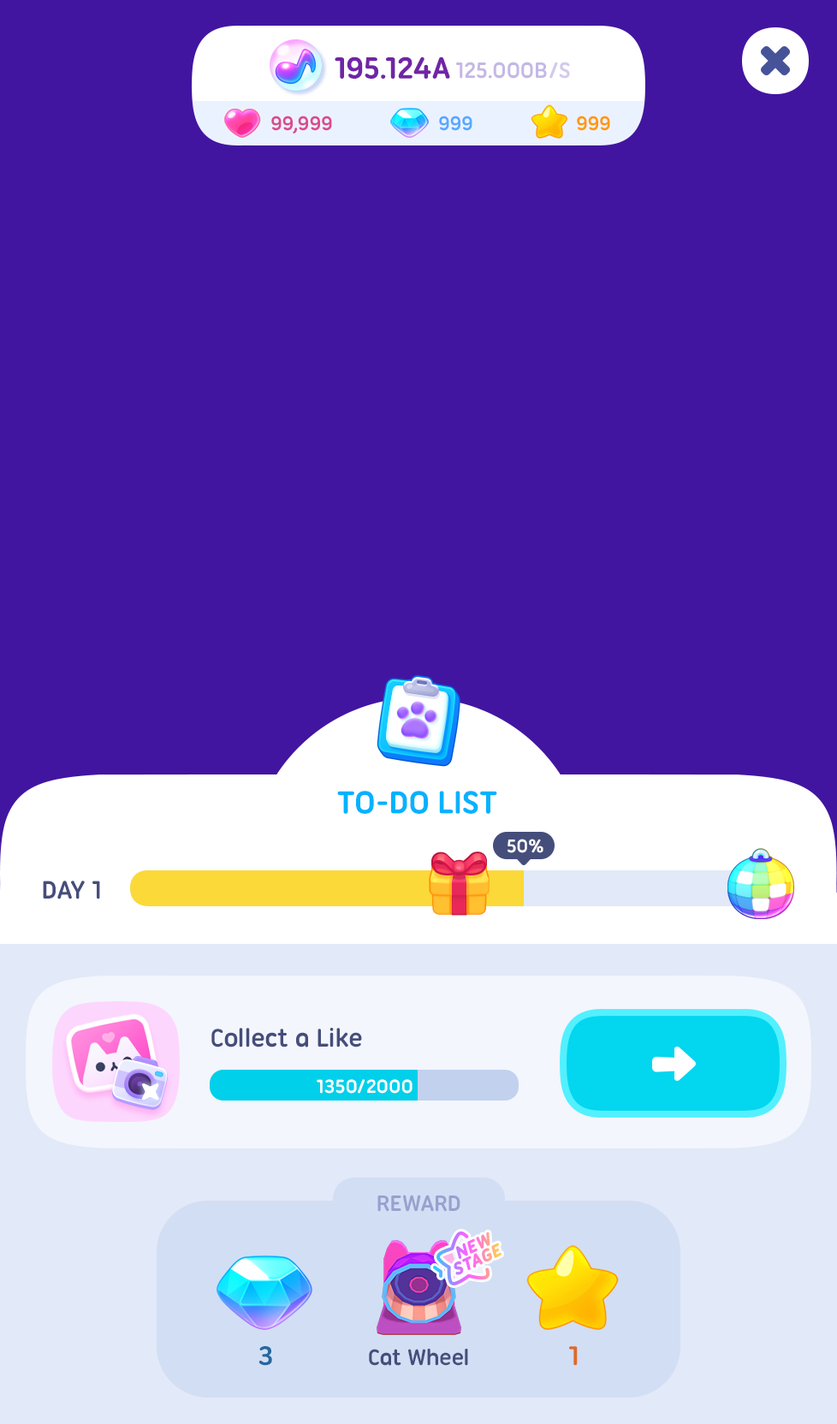
<style>
.page{position:relative;width:837px;height:1424px;background:#4115a0}
.page>*{position:absolute;margin:0}
.t1{font:34.2px "UbuntuTitling-Bold";letter-spacing:-0.025em;color:#05b2ff;text-transform:uppercase}
.t2{font:20px "UbuntuTitling-Bold";letter-spacing:-0.025em;color:#ffffff}
.t3{font:27.4px "UbuntuTitling-Bold";letter-spacing:-0.025em;color:#454e7b;text-transform:uppercase}
.t4{font:27.4px "UbuntuTitling-Bold";letter-spacing:-0.025em;color:#454e7b}
.t5{font:20.5px "UbuntuTitling-Bold";letter-spacing:-0.025em;color:#ffffff}
.t6{font:24px "UbuntuTitling-Bold";letter-spacing:-0.025em;color:#98a1ce;text-transform:uppercase}
.t7{font:29.1px "UbuntuTitling-Bold";letter-spacing:-0.025em;color:#23679f}
.t8{font:24px "UbuntuTitling-Bold";letter-spacing:-0.025em;color:#454e7b}
.t9{font:29.1px "UbuntuTitling-Bold";letter-spacing:-0.025em;color:#df6a28;text-transform:uppercase}
</style>
<div class="page">
<p class="t1" style="left:337px;top:791px;width:160px;height:23px">To-do List</p>
<p class="t2" style="left:508px;top:839px;width:36px;height:14px">50%</p>
<p class="t3" style="left:43px;top:881px;width:57px;height:19px">Day 1</p>
<p class="t4" style="left:211px;top:1028px;width:151px;height:20px">Collect a Like</p>
<p class="t5" style="left:317px;top:1079px;width:96px;height:15px">1350/2000</p>
<p class="t6" style="left:377px;top:1195px;width:84px;height:17px">Reward</p>
<p class="t7" style="left:259px;top:1346px;width:13px;height:20px">3</p>
<p class="t8" style="left:369px;top:1349px;width:99px;height:17px">Cat Wheel</p>
<p class="t9" style="left:569px;top:1346px;width:9px;height:20px">1</p>
</div>
